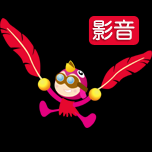
<style>
.page{position:relative;width:152px;height:152px;background:#000000}
.page>*{position:absolute;margin:0}
.t1{font:22px "ç»å¸ä¸­åç®-regular";letter-spacing:-0.02em;color:#faf7f7}
</style>
<div class="page">
<p class="t1" style="left:92px;top:19px;width:43px;height:22px">影音</p>
</div>
